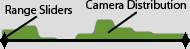
<style>
.page{position:relative;width:190px;height:49px;background:#dddddd}
.page>*{position:absolute;margin:0}
.t1{font:12px "MyriadPro-Regular";color:#000000}
</style>
<div class="page">
<p class="t1" style="left:5px;top:5px;width:67px;height:11px">Range Sliders</p>
<p class="t1" style="left:86px;top:0px;width:100px;height:9px">Camera Distribution</p>
</div>
